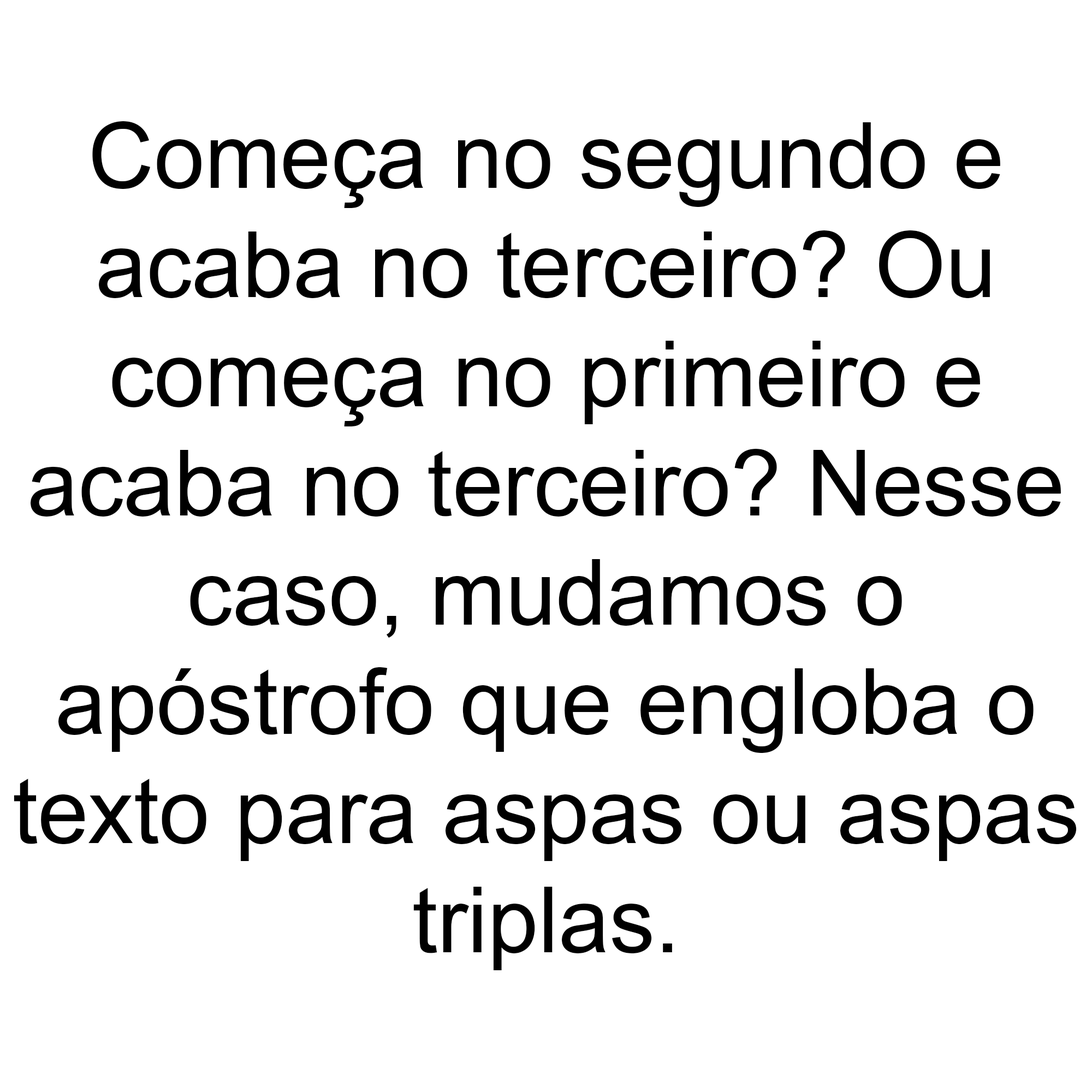
<style>
.page{position:relative;width:1092px;height:1092px;background:#ffffff}
.page>*{position:absolute;margin:0}
.t1{font:91px "ArialMT";color:#000000}
</style>
<div class="page">
<p class="t1" style="left:14px;top:121px;width:1063px;height:849px;text-align:center">Começa no segundo e<br>acaba no terceiro? Ou<br>começa no primeiro e<br>acaba no terceiro? Nesse<br>caso, mudamos o<br>apóstrofo que engloba o<br>texto para aspas ou aspas<br>triplas.</p>
</div>
